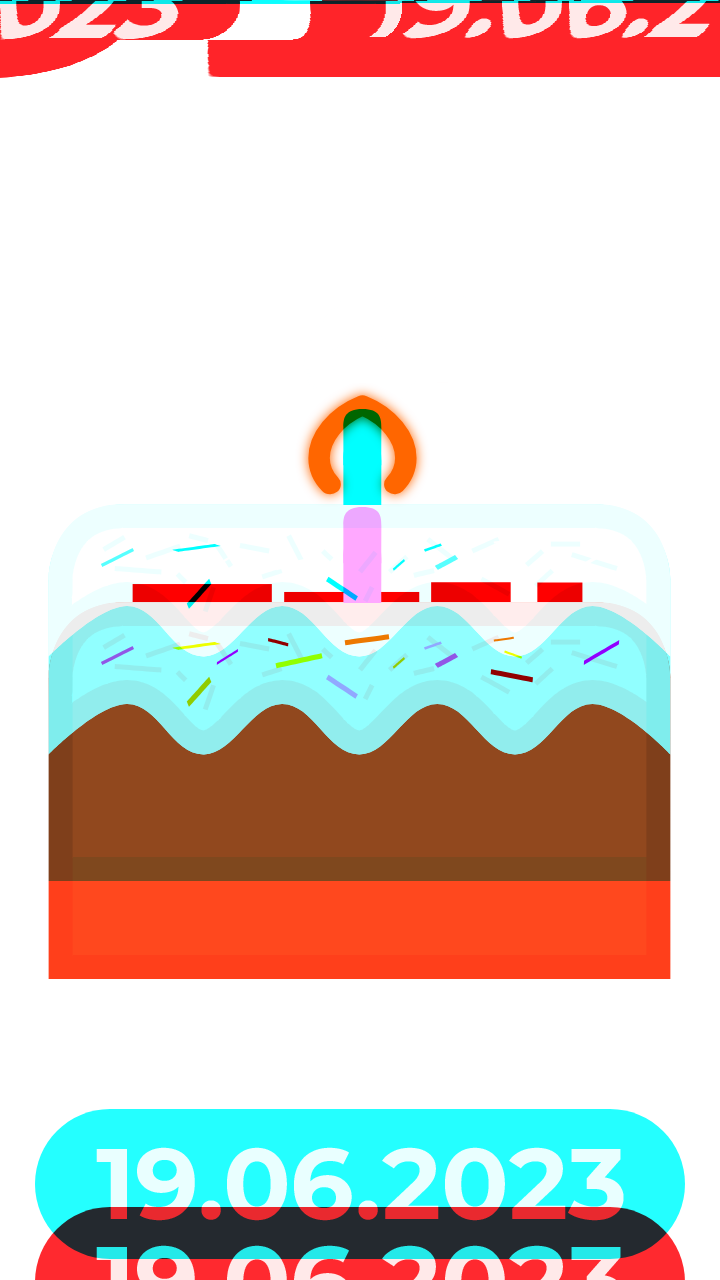
<style>
.page{position:relative;width:720px;height:1280px;background:#ffffff}
.page>*{position:absolute;margin:0}
.t1{font:100px "Montserrat-Bold";color:#e9e9e9}
</style>
<div class="page">
<p class="t1" style="left:96px;top:1144px;width:528px;height:74px">19.06.2023</p>
</div>
